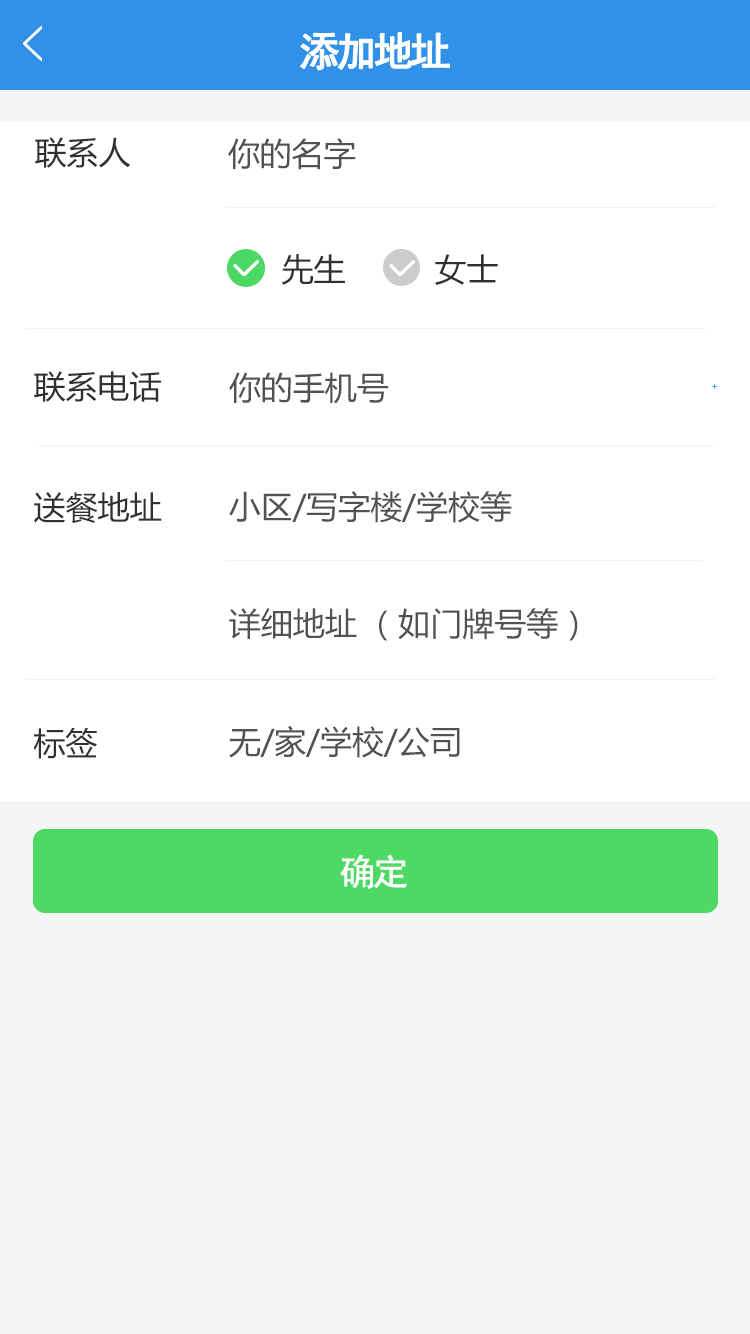
<style>
.page{position:relative;width:750px;height:1334px;background:#ffffff}
.page>*{position:absolute;margin:0}
.t1{font:40px "SimHei";letter-spacing:-0.1em;color:#ffffff;font-weight:bold}
.t2{font:32px "MicrosoftYaHei";color:#303030}
.t3{font:32px "MicrosoftYaHei";color:#525252}
.t4{font:36px "SimHei";letter-spacing:-0.1em;color:#ffffff;font-weight:bold}
</style>
<div class="page">
<p class="t1" style="left:300px;top:32px;width:150px;height:38px">添加地址</p>
<p class="t2" style="left:35px;top:137px;width:96px;height:31px">联系人</p>
<p class="t3" style="left:228px;top:138px;width:128px;height:32px">你的名字</p>
<p class="t2" style="left:281px;top:254px;width:64px;height:31px">先生</p>
<p class="t2" style="left:435px;top:254px;width:63px;height:31px">女士</p>
<p class="t2" style="left:34px;top:371px;width:127px;height:31px">联系电话</p>
<p class="t3" style="left:229px;top:372px;width:160px;height:32px">你的手机号</p>
<p class="t2" style="left:34px;top:492px;width:128px;height:32px">送餐地址</p>
<p class="t3" style="left:229px;top:491px;width:283px;height:32px">小区/写字楼/学校等</p>
<p class="t3" style="left:229px;top:608px;width:349px;height:33px">详细地址 （如门牌号等）</p>
<p class="t3" style="left:229px;top:725px;width:231px;height:33px">无/家/学校/公司</p>
<p class="t2" style="left:33px;top:728px;width:64px;height:31px">标签</p>
<p class="t4" style="left:340px;top:854px;width:67px;height:35px">确定</p>
</div>
